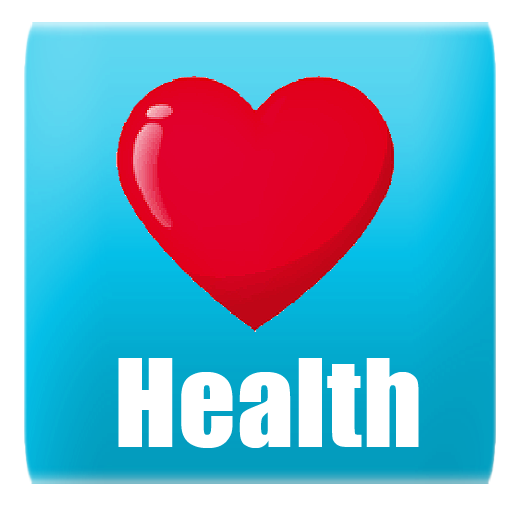
<style>
.page{position:relative;width:512px;height:512px;background:#ffffff}
.page>*{position:absolute;margin:0}
.t1{font:112.7px "Impact";letter-spacing:0.012em;color:#ffffff}
</style>
<div class="page">
<p class="t1" style="left:118px;top:358px;width:301px;height:90px">Health</p>
</div>
